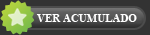
<style>
.page{position:relative;width:150px;height:35px;background:#333333}
.page>*{position:absolute;margin:0}
.t1{font:11px "TimesNewRomanPS-BoldMT";color:#ffffff}
</style>
<div class="page">
<p class="t1" style="left:36px;top:14px;width:101px;height:8px">VER ACUMULADO</p>
</div>
